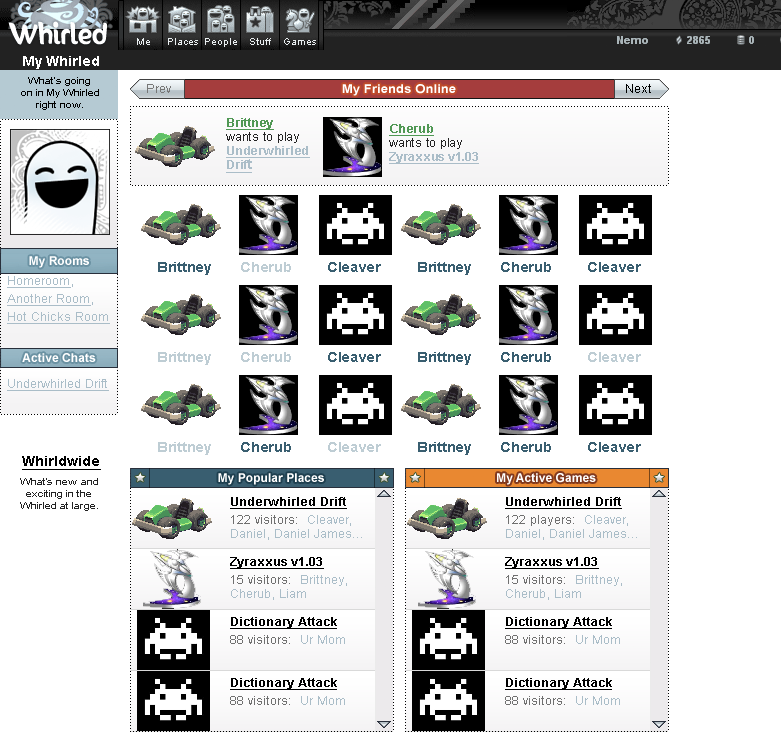
<style>
.page{position:relative;width:782px;height:750px;background:#ffffff}
.page>*{position:absolute;margin:0}
.t1{font:14px "Arial-BoldMT";color:#ffffff}
.t2{font:10px "ArialMT";color:#000000;scale:1.1 1}
.t3{font:12px "ArialMT";color:#777777;scale:1.1 1}
.t4{font:12px "Arial-BoldMT";color:#ffffff;scale:1.1 1}
.t5{font:12px "ArialMT";color:#000000;scale:1.1 1}
.t6{font:12px/14px "Arial-BoldMT";letter-spacing:-0.018em;color:#aabdc8;text-decoration:underline;scale:1.1 1}
.t7{font:12px/14px "Arial-BoldMT";letter-spacing:-0.018em;color:#509854;text-decoration:underline;scale:1.1 1}
.t8{font:12px/14px "ArialMT";letter-spacing:-0.018em;color:#222222;scale:1.1 1}
.t9{font:14px/14px "Arial-BoldMT";letter-spacing:-0.018em;color:#aabdc8;text-decoration:underline;scale:1.1 1}
.t10{font:12px "Arial-BoldMT";letter-spacing:0.005em;color:#ffffff}
.t11{font:14px "Arial-BoldMT";letter-spacing:-0.018em;color:#395e70;scale:1.1 1}
.t12{font:14px "Arial-BoldMT";letter-spacing:-0.018em;color:#becdd4;scale:1.1 1}
.t13{font:12px/18px "ArialMT";color:#aabdc8;text-decoration:underline;scale:1.1 1}
.t14{font:12px/18px "ArialMT";color:#aabdc8;scale:1.1 1}
.t15{font:12px "ArialMT";color:#aabdc8;text-decoration:underline;scale:1.1 1}
.t16{font:14px "Arial-BoldMT";color:#000000;text-decoration:underline}
.t17{font:10px "ArialMT";color:#222222;scale:1.1 1}
.t18{font:12px "ArialMT";color:#aabdc8;scale:1.1 1}
.t19{font:12px "Arial-BoldMT";color:#000000;text-decoration:underline;scale:1.1 1}
.t20{font:12px/14px "Arial-BoldMT";color:#000000;text-decoration:underline;scale:1.1 1}
.t21{font:12px/18px "Arial-BoldMT";color:#000000;text-decoration:underline;scale:1.1 1}
.t22{font:12px/18px "ArialMT";color:#707070;scale:1.1 1}
.t23{font:12px "ArialMT";color:#707070;scale:1.1 1}
</style>
<div class="page">
<p class="t1" style="left:23px;top:56px;width:76px;height:13px">My Whirled</p>
<p class="t2" style="left:21px;top:77px;width:78px;height:33px;text-align:center">What’s going<br>on in My Whirled<br>right now.</p>
<p class="t3" style="left:147px;top:84px;width:24px;height:9px">Prev</p>
<p class="t4" style="left:342px;top:84px;width:114px;height:12px">My Friends Online</p>
<p class="t5" style="left:626px;top:84px;width:25px;height:9px">Next</p>
<p class="t6" style="left:226px;top:118px;width:84px;height:55px"><span class="t7">Brittney<br></span><span class="t8">wants to play<br></span>Underwhirled<br>Drif<span class="t9">t</span></p>
<p class="t6" style="left:389px;top:124px;width:90px;height:40px"><span class="t7">Cherub<br></span><span class="t8">wants to play<br></span>Zyraxxus v1.03</p>
<p class="t10" style="left:29px;top:256px;width:60px;height:12px">My Rooms</p>
<p class="t11" style="left:158px;top:262px;width:53px;height:13px">Brittney</p>
<p class="t12" style="left:241px;top:262px;width:50px;height:10px">Cherub</p>
<p class="t11" style="left:328px;top:262px;width:53px;height:10px">Cleaver</p>
<p class="t11" style="left:418px;top:262px;width:53px;height:13px">Brittney</p>
<p class="t11" style="left:501px;top:262px;width:50px;height:10px">Cherub</p>
<p class="t11" style="left:588px;top:262px;width:53px;height:10px">Cleaver</p>
<p class="t13" style="left:7px;top:276px;width:103px;height:48px">Homeroom<span class="t14">, <br></span>Another Room<span class="t14">, <br></span>Hot Chicks Room</p>
<p class="t10" style="left:22px;top:353px;width:74px;height:9px">Active Chats</p>
<p class="t12" style="left:158px;top:352px;width:53px;height:13px">Brittney</p>
<p class="t12" style="left:241px;top:352px;width:50px;height:10px">Cherub</p>
<p class="t11" style="left:328px;top:352px;width:53px;height:10px">Cleaver</p>
<p class="t11" style="left:418px;top:352px;width:53px;height:13px">Brittney</p>
<p class="t11" style="left:501px;top:352px;width:50px;height:10px">Cherub</p>
<p class="t12" style="left:588px;top:352px;width:53px;height:10px">Cleaver</p>
<p class="t15" style="left:7px;top:379px;width:102px;height:12px">Underwhirled Drift</p>
<p class="t12" style="left:158px;top:442px;width:53px;height:13px">Brittney</p>
<p class="t11" style="left:241px;top:442px;width:50px;height:10px">Cherub</p>
<p class="t12" style="left:328px;top:442px;width:53px;height:10px">Cleaver</p>
<p class="t11" style="left:418px;top:442px;width:53px;height:13px">Brittney</p>
<p class="t11" style="left:501px;top:442px;width:50px;height:10px">Cherub</p>
<p class="t11" style="left:588px;top:442px;width:53px;height:10px">Cleaver</p>
<p class="t16" style="left:22px;top:456px;width:79px;height:14px">Whirldwide</p>
<p class="t10" style="left:218px;top:473px;width:106px;height:12px">My Popular Places</p>
<p class="t10" style="left:497px;top:473px;width:99px;height:12px">My Active Games</p>
<p class="t17" style="left:20px;top:478px;width:78px;height:33px;text-align:center">What’s new and<br>exciting in the <br>Whirled at large.</p>
<p class="t18" style="left:230px;top:497px;width:132px;height:43px"><span class="t19">U</span><span class="t20">nde</span><span class="t21">rwhirled Drift<br></span><span class="t22">122 visito</span><span class="t23">rs:  </span>Cleaver,<br>Daniel, Daniel James...</p>
<p class="t18" style="left:505px;top:497px;width:132px;height:43px"><span class="t19">U</span><span class="t20">nde</span><span class="t21">rwhirled Drift<br></span><span class="t22">122 players:  </span>Cleaver,<br>Daniel, Daniel James...</p>
<p class="t18" style="left:230px;top:557px;width:117px;height:43px"><span class="t19">Zyraxxus v1.03<br></span><span class="t22">15 visitors</span><span class="t23">:  </span>Brittney,<br>Cherub, Liam</p>
<p class="t18" style="left:505px;top:557px;width:117px;height:43px"><span class="t19">Zyraxxus v1.03<br></span><span class="t22">15 visitors</span><span class="t23">:  </span>Brittney,<br>Cherub, Liam</p>
<p class="t19" style="left:230px;top:617px;width:115px;height:27px">Dictionary Attack<br><span class="t22">88 visitors</span><span class="t23">:  </span><span class="t18">Ur Mom</span></p>
<p class="t19" style="left:505px;top:617px;width:115px;height:27px">Dictionary Attack<br><span class="t22">88 visitors</span><span class="t23">:  </span><span class="t18">Ur Mom</span></p>
<p class="t19" style="left:230px;top:678px;width:115px;height:27px">Dictionary Attack<br><span class="t22">88 visitors</span><span class="t23">:  </span><span class="t18">Ur Mom</span></p>
<p class="t19" style="left:505px;top:678px;width:115px;height:27px">Dictionary Attack<br><span class="t22">88 visitors</span><span class="t23">:  </span><span class="t18">Ur Mom</span></p>
</div>
